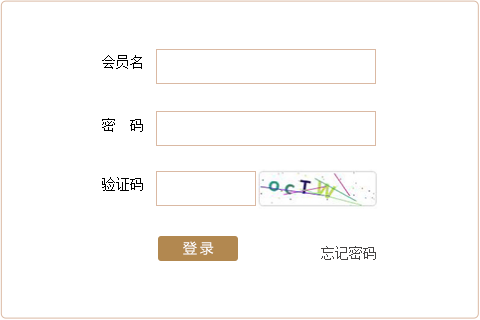
<style>
.page{position:relative;width:480px;height:320px;background:#ffffff}
.page>*{position:absolute;margin:0}
.t1{font:14px "SimSun";color:#000000}
.t2{font:14px "MicrosoftYaHei";letter-spacing:0.2em;color:#ffffff}
.t3{font:14px "SimSun";color:#464444}
</style>
<div class="page">
<p class="t1" style="left:102px;top:55px;width:40px;height:14px">会员名</p>
<p class="t1" style="left:102px;top:118px;width:41px;height:14px">密　码</p>
<p class="t1" style="left:102px;top:177px;width:41px;height:14px">验证码</p>
<p class="t2" style="left:183px;top:241px;width:31px;height:14px">登录</p>
<p class="t3" style="left:321px;top:246px;width:55px;height:14px">忘记密码</p>
</div>
